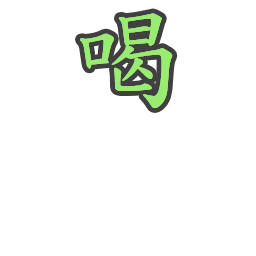
<style>
.page{position:relative;width:256px;height:256px;background:#ffffff}
.page>*{position:absolute;margin:0}
.t1{font:114px "DFKaiShu-SB-Estd-BF";color:#98ec6f}
</style>
<div class="page">
<p class="t1" style="left:80px;top:13px;width:93px;height:95px">喝</p>
<p class="t1" style="left:80px;top:13px;width:93px;height:95px">喝</p>
</div>
